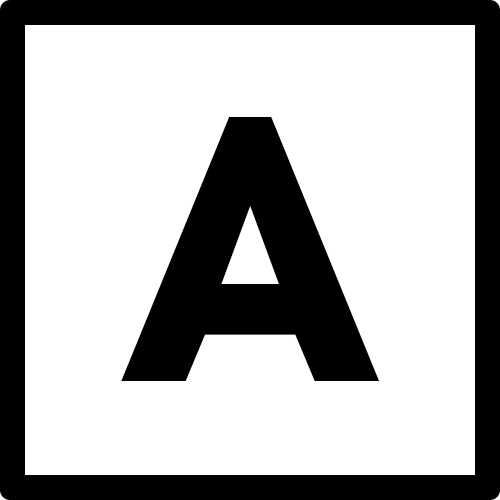
<style>
.page{position:relative;width:500px;height:500px;background:#ffffff}
.page>*{position:absolute;margin:0}
.t1{font:300px "HeadlineR-HM";color:#000000}
</style>
<div class="page">
<p class="t1" style="left:121px;top:116px;width:259px;height:265px">A</p>
</div>
